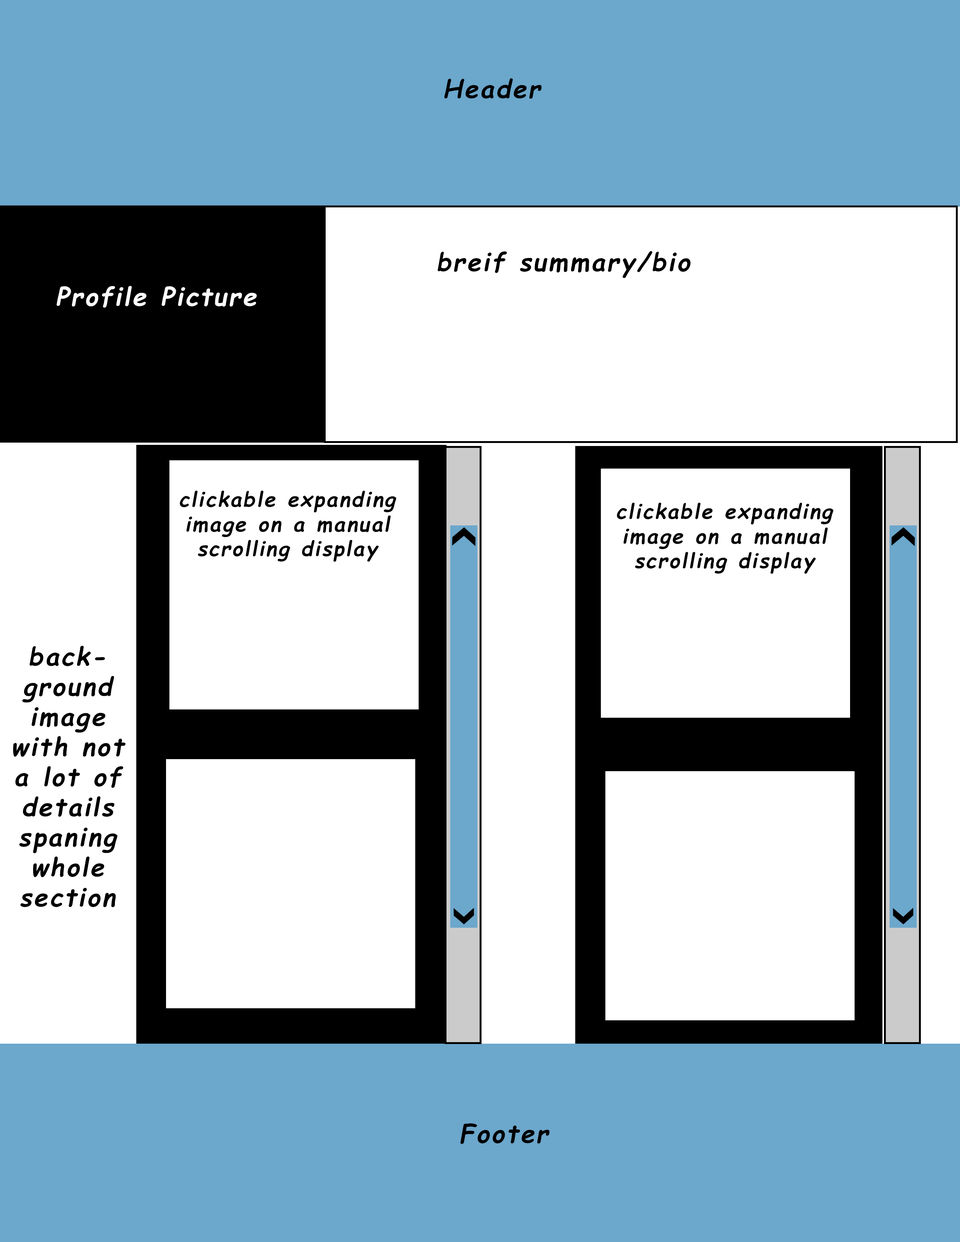
<style>
.page{position:relative;width:960px;height:1242px;background:#ffffff}
.page>*{position:absolute;margin:0}
.t1{font:25.1px "ComicSansMS-Bold";letter-spacing:0.075em;color:#000000;font-style:italic}
.t2{font:25.1px "ComicSansMS-Bold";letter-spacing:0.075em;color:#fefcfc;font-style:italic}
.t3{font:20.5px "ComicSansMS-Bold";letter-spacing:0.075em;color:#000000;font-style:italic}
</style>
<div class="page">
<p class="t1" style="left:444px;top:78px;width:98px;height:21px">Header</p>
<p class="t1" style="left:437px;top:251px;width:253px;height:27px">breif summary/bio</p>
<p class="t2" style="left:56px;top:286px;width:201px;height:22px">Profile Picture</p>
<p class="t3" style="left:180px;top:490px;width:216px;height:72px;text-align:center">clickable expanding image on a manual scrolling display</p>
<p class="t3" style="left:617px;top:503px;width:216px;height:71px;text-align:center">clickable expanding image on a manual scrolling display</p>
<p class="t1" style="left:13px;top:646px;width:113px;height:262px;text-align:center">background image with not a lot of details spaning whole section</p>
<p class="t1" style="left:460px;top:1123px;width:90px;height:21px">Footer</p>
</div>
